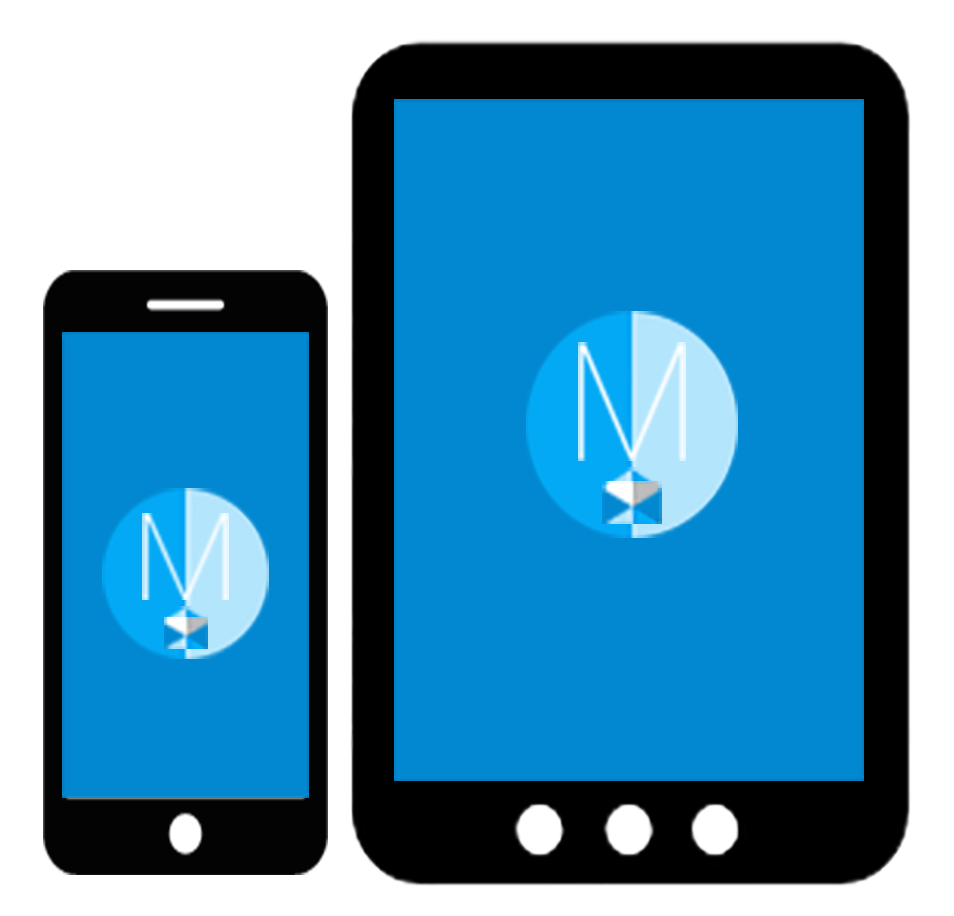
<style>
.page{position:relative;width:954px;height:916px;background:#0288d1}
.page>*{position:absolute;margin:0}
.t1{font:163px "Roboto-Thin";color:#ffffff}
.t2{font:122.9px "Roboto-Thin";color:#ffffff}
</style>
<div class="page">
<p class="t1" style="left:578px;top:342px;width:108px;height:119px">M</p>
<p class="t2" style="left:142px;top:513px;width:87px;height:87px">M</p>
</div>
